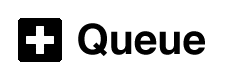
<style>
.page{position:relative;width:240px;height:80px;background:#ffffff}
.page>*{position:absolute;margin:0}
.t1{font:41.7px "Helvetica-Bold";color:#000000}
</style>
<div class="page">
<p class="t1" style="left:78px;top:23px;width:127px;height:33px">Queue</p>
</div>
